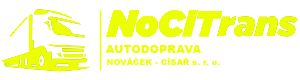
<style>
.page{position:relative;width:300px;height:80px;background:#ffffff}
.page>*{position:absolute;margin:0}
.t1{font:11px "Arial-Black";letter-spacing:0.025em;color:#ebff00}
.t2{font:8px "Arial-Black";letter-spacing:0.025em;color:#ebff00}
</style>
<div class="page">
<p class="t1" style="left:105px;top:45px;width:96px;height:8px">AUTODOPRAVA</p>
<p class="t2" style="left:107px;top:57px;width:113px;height:9px">NOVÁČEK - CÍSAŘ s. r. o.</p>
</div>
